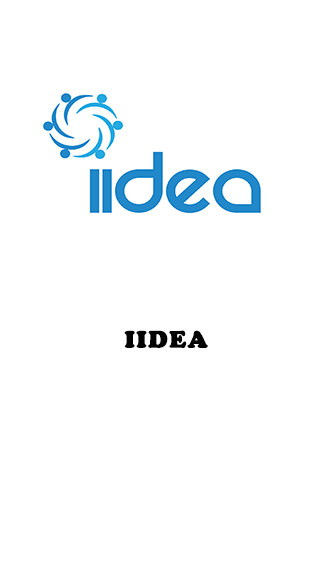
<style>
.page{position:relative;width:320px;height:568px;background:#ffffff}
.page>*{position:absolute;margin:0}
.t1{font:24px "CooperBlack";letter-spacing:0.05em;color:#030303;font-weight:bold}
</style>
<div class="page">
<p class="t1" style="left:124px;top:330px;width:84px;height:18px">IIDEA</p>
</div>
